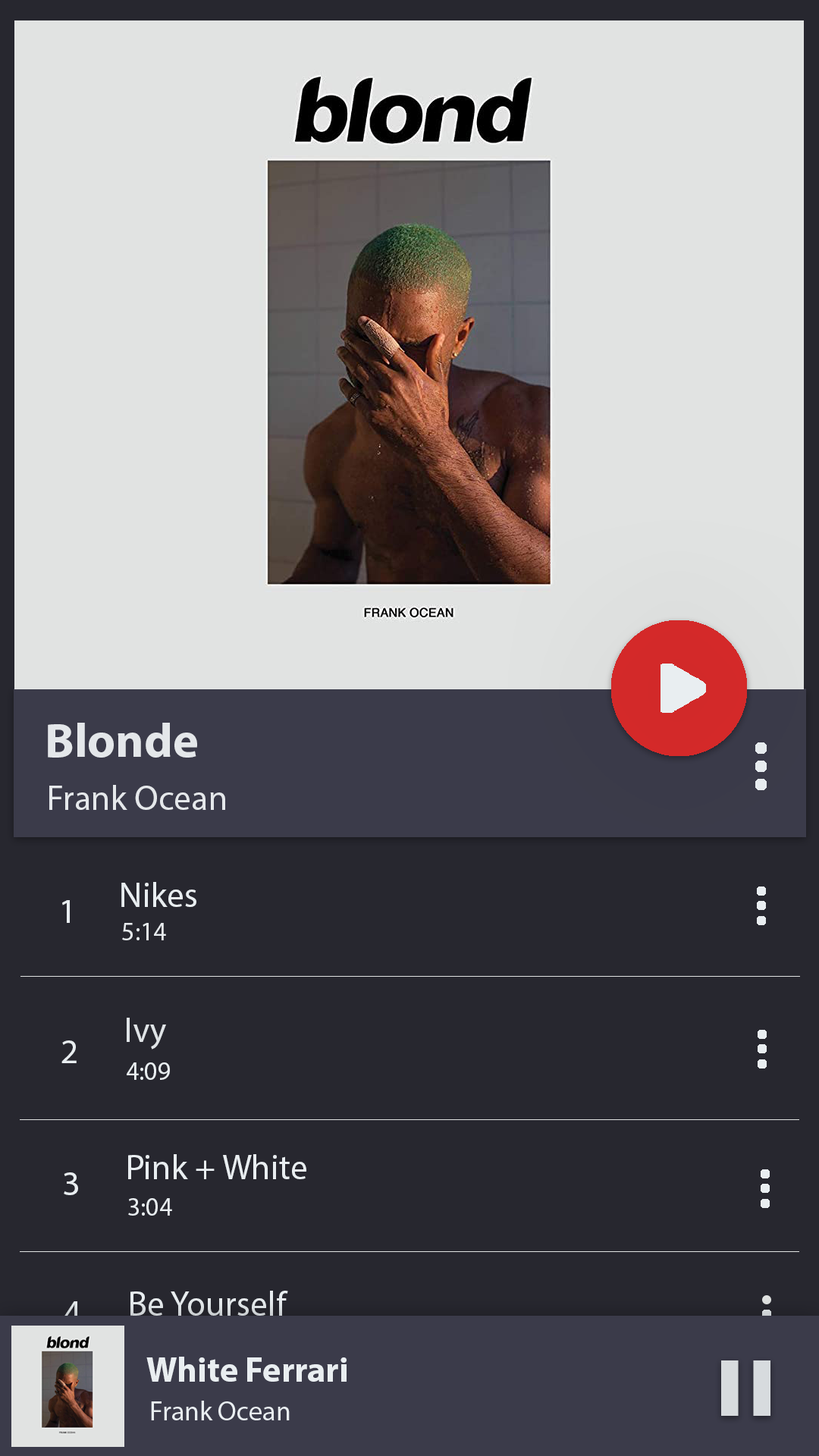
<style>
.page{position:relative;width:819px;height:1456px;background:#27272f}
.page>*{position:absolute;margin:0}
.t1{font:48.5px "MyriadPro-Bold";color:#e4e7ea}
.t2{font:34.9px "MyriadPro-Regular";color:#e5e8eb}
.t3{font:34.9px "MyriadPro-Regular";color:#e9eef1}
.t4{font:25.8px "MyriadPro-Regular";color:#e7ebee}
.t5{font:34.9px "MyriadPro-Regular";color:#e0e4e7}
.t6{font:25.8px "MyriadPro-Regular";color:#e9eef1}
.t7{font:34.9px "MyriadPro-Regular"}
.t8{font:34.9px "MyriadPro-Bold";color:#e9eef1}
</style>
<div class="page">
<p class="t1" style="left:48px;top:723px;width:149px;height:35px">Blonde</p>
<p class="t2" style="left:49px;top:785px;width:176px;height:25px">Frank Ocean</p>
<p class="t3" style="left:121px;top:882px;width:75px;height:25px">Nikes</p>
<p class="t3" style="left:62px;top:900px;width:8px;height:23px">1</p>
<p class="t4" style="left:122px;top:923px;width:44px;height:17px">5:14</p>
<p class="t5" style="left:127px;top:1018px;width:39px;height:32px">Ivy</p>
<p class="t3" style="left:61px;top:1040px;width:16px;height:23px">2</p>
<p class="t6" style="left:127px;top:1062px;width:43px;height:18px">4:09</p>
<p class="t3" style="left:128px;top:1154px;width:178px;height:25px">Pink + White</p>
<p class="t3" style="left:64px;top:1172px;width:14px;height:23px">3</p>
<p class="t6" style="left:128px;top:1198px;width:44px;height:18px">3:04</p>
<p class="t7" style="left:64px;top:1301px;width:17px;height:23px">4</p>
<p class="t3" style="left:130px;top:1291px;width:158px;height:25px">Be Yourself</p>
<p class="t8" style="left:146px;top:1357px;width:201px;height:25px">White Ferrari</p>
</div>
